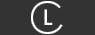
<style>
.page{position:relative;width:95px;height:35px;background:#333333}
.page>*{position:absolute;margin:0}
.t1{font:24px "EstrangeloEdessa";color:#ffffff}
</style>
<div class="page">
<p class="t1" style="left:44px;top:9px;width:9px;height:16px">L</p>
</div>
